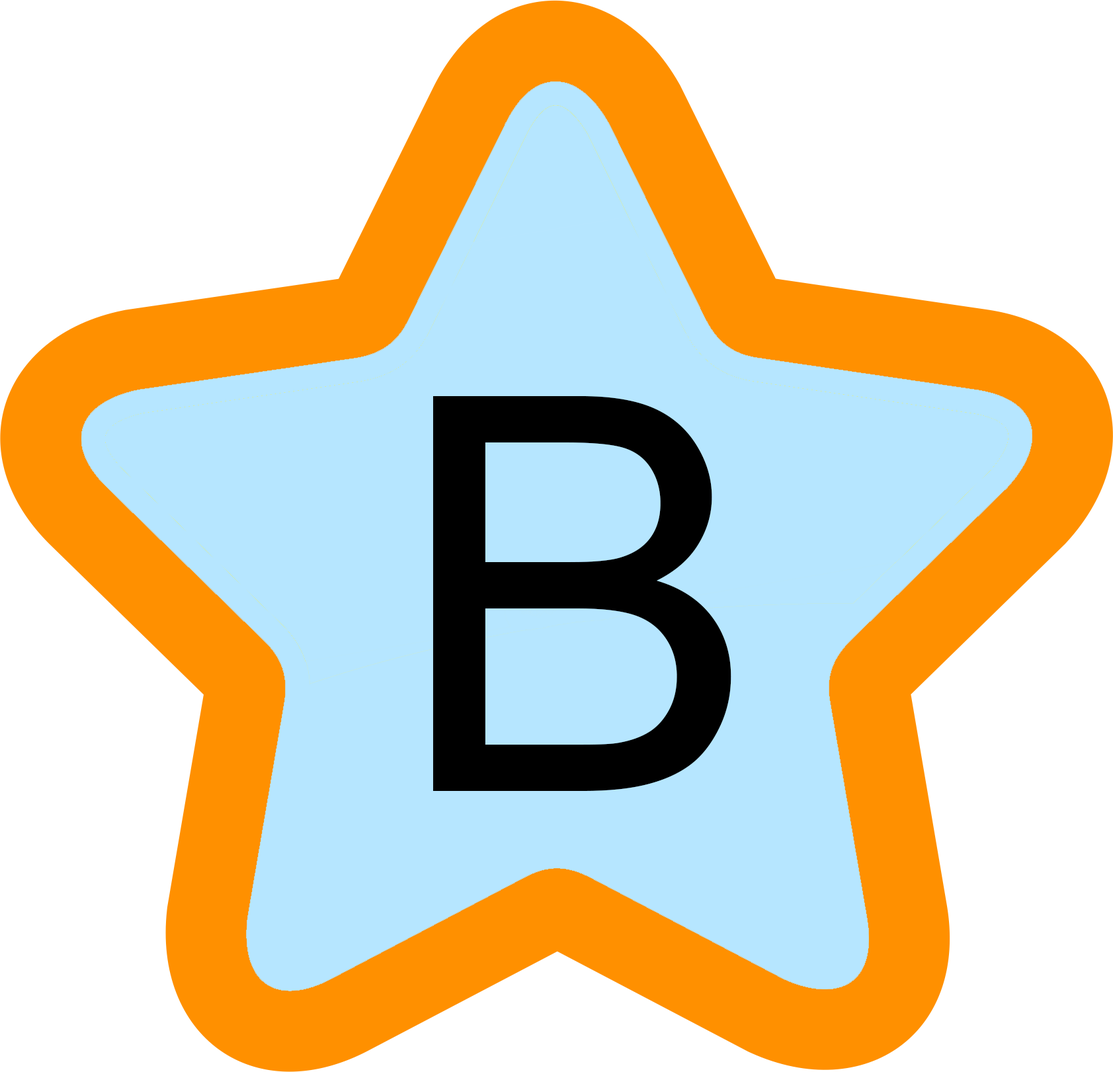
<style>
.page{position:relative;width:1113px;height:1072px;background:#ffffff}
.page>*{position:absolute;margin:0}
.t1{font:550.9px "ArialMT";color:#000000}
</style>
<div class="page">
<p class="t1" style="left:432px;top:396px;width:299px;height:395px">B</p>
</div>
